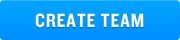
<style>
.page{position:relative;width:180px;height:40px}
.page>*{position:absolute;margin:0}
.t1{font:20px "Knockout-HTF50-Welterweight";letter-spacing:0.04em;color:#ffffff}
</style>
<div class="page">
<p class="t1" style="left:35px;top:13px;width:109px;height:15px">CREATE TEAM</p>
</div>
